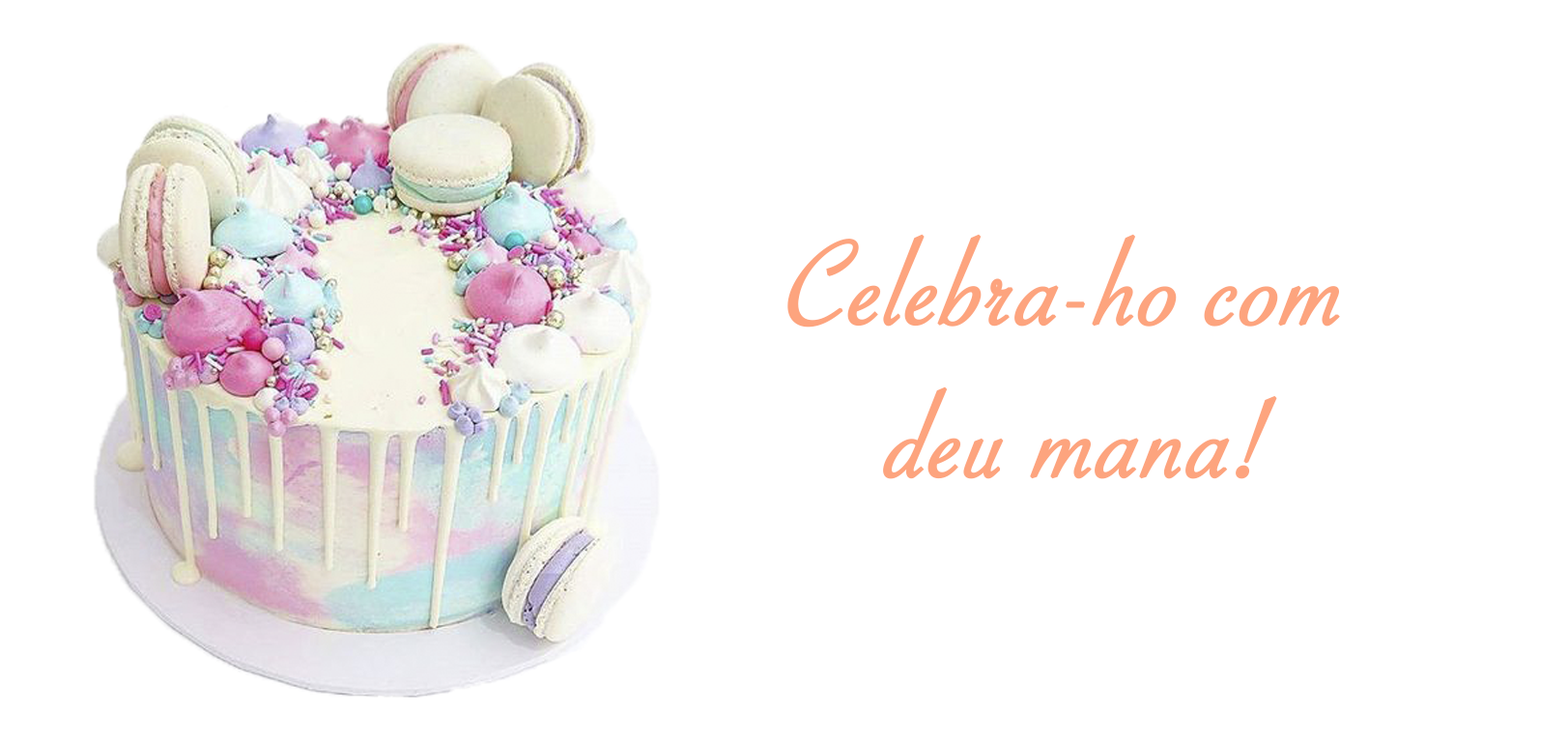
<style>
.page{position:relative;width:1568px;height:742px;background:#ffffff}
.page>*{position:absolute;margin:0}
.t1{font:127.6px "SavoyeLetPlain";color:#fda47e;font-weight:bold;font-style:italic}
</style>
<div class="page">
<p class="t1" style="left:787px;top:234px;width:553px;height:245px;text-align:center">Celebra-ho com <br>deu mana!</p>
</div>
